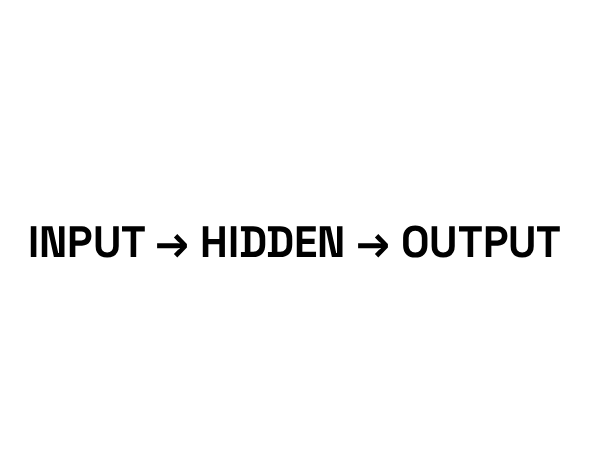
<style>
.page{position:relative;width:591px;height:472px;background:#ffffff}
.page>*{position:absolute;margin:0}
.t1{font:44px "SpaceGroteskLight-Bold";color:#000000;scale:0.96 1}
</style>
<div class="page">
<p class="t1" style="left:30px;top:225px;width:530px;height:33px">INPUT → HIDDEN → OUTPUT</p>
</div>
